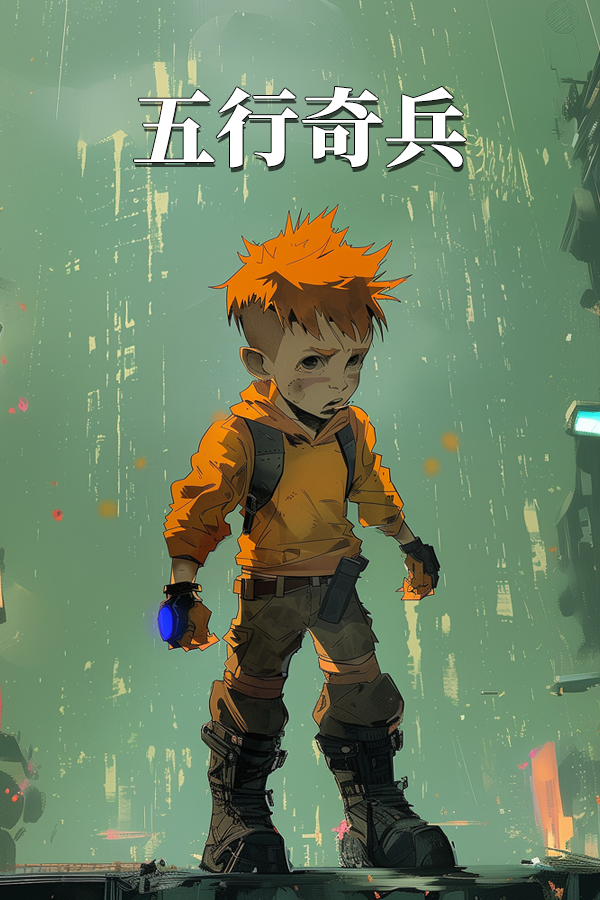
<style>
.page{position:relative;width:600px;height:900px}
.page>*{position:absolute;margin:0}
.t1{font:84px "SourceHanSerifSC-Heavy";color:#ffffff}
</style>
<div class="page">
<p class="t1" style="left:133px;top:87px;width:333px;height:81px">五行奇兵</p>
</div>
